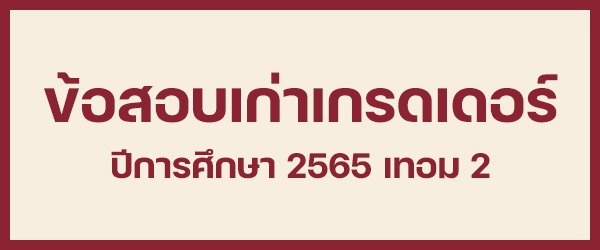
<style>
.page{position:relative;width:600px;height:250px;background:#f8eedf}
.page>*{position:absolute;margin:0}
.t1{font:80px "FCMinimalBold";color:#8b2332}
.t2{font:48px "FCMinimalBold";color:#8b2332}
</style>
<div class="page">
<p class="t1" style="left:44px;top:72px;width:514px;height:51px">ข้อสอบเก่าเกรดเดอร์</p>
<p class="t2" style="left:111px;top:148px;width:379px;height:31px">ปีการศึกษา 2565 เทอม 2</p>
</div>
